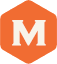
<style>
.page{position:relative;width:57px;height:64px;background:#f16c32}
.page>*{position:absolute;margin:0}
.t1{font:38px "CopperplateGothic-Bold";letter-spacing:0.005em;color:#f8f4e9;font-weight:bold}
</style>
<div class="page">
<p class="t1" style="left:12px;top:20px;width:34px;height:26px">M</p>
</div>
